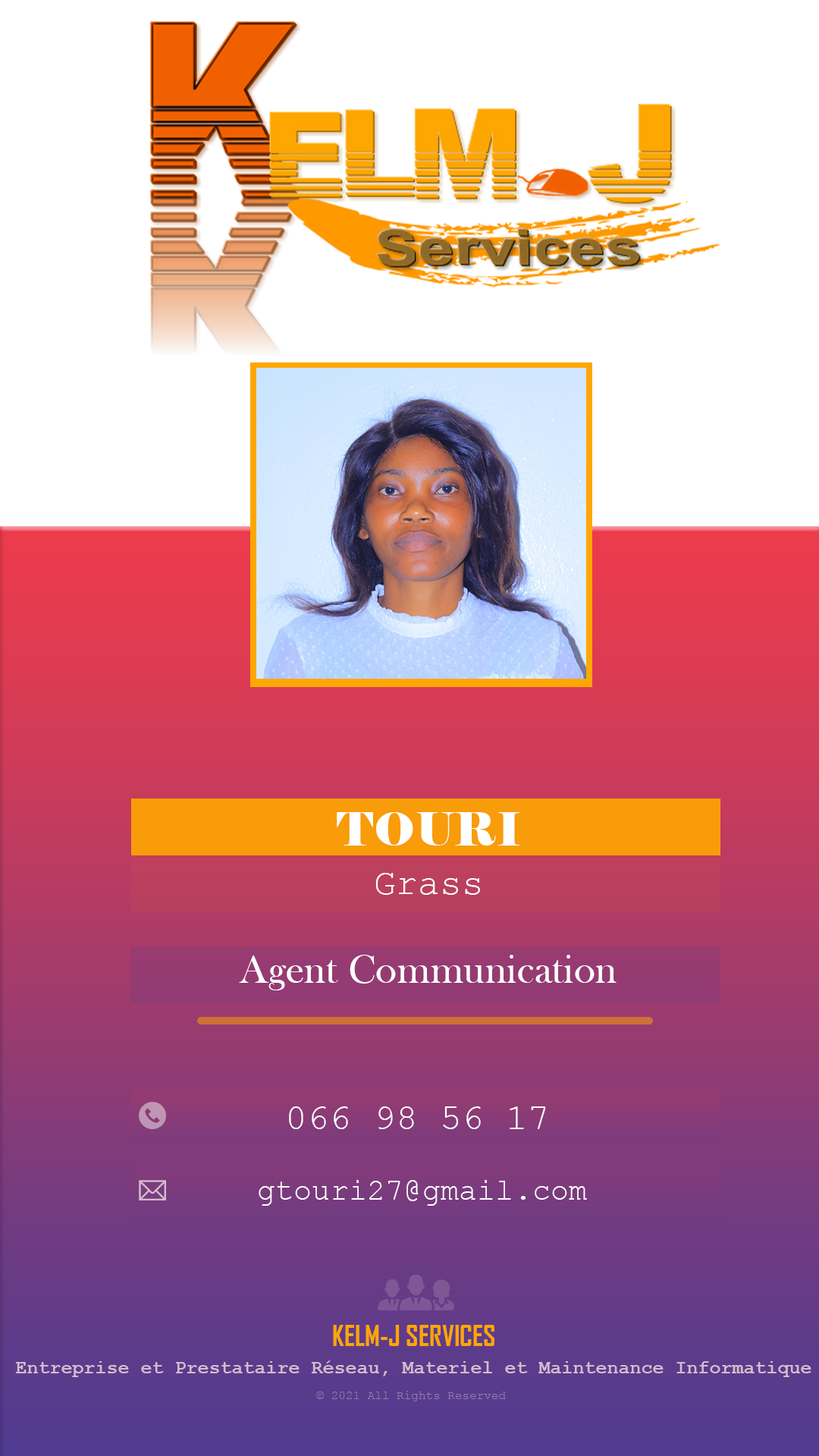
<style>
.page{position:relative;width:819px;height:1456px;background:#ffffff}
.page>*{position:absolute;margin:0}
.t1{font:45.5px "Elephant-Regular";letter-spacing:0.01em;color:#ffffff}
.t2{font:36.4px "CourierNewPSMT";letter-spacing:0.005em;color:#ffffff}
.t3{font:40.9px "BaskOldFace";letter-spacing:0.01em;color:#ffffff}
.t4{font:30.3px "CourierNewPSMT";letter-spacing:0.005em;color:#ffffff}
.t5{font:27.3px "AgencyFB-Bold";color:#fea600}
.t6{font:19px "CourierNewPS-BoldMT";color:#ebbfdf}
.t7{font:12.1px "CourierNewPSMT";color:#957aa7}
</style>
<div class="page">
<p class="t1" style="left:337px;top:812px;width:183px;height:34px">TOURI</p>
<p class="t2" style="left:375px;top:873px;width:105px;height:22px">Grass</p>
<p class="t3" style="left:239px;top:955px;width:378px;height:35px">Agent Communication</p>
<p class="t2" style="left:289px;top:1106px;width:257px;height:23px">066 98 56 17</p>
<p class="t4" style="left:259px;top:1180px;width:328px;height:26px">gtouri27@gmail.com</p>
<p class="t5" style="left:333px;top:1325px;width:161px;height:21px">KELM-J SERVICES</p>
<p class="t6" style="left:15px;top:1360px;width:796px;height:17px">Entreprise et Prestataire Réseau, Materiel et Maintenance Informatique</p>
<p class="t7" style="left:316px;top:1391px;width:190px;height:10px">© 2021 All Rights Reserved</p>
</div>
